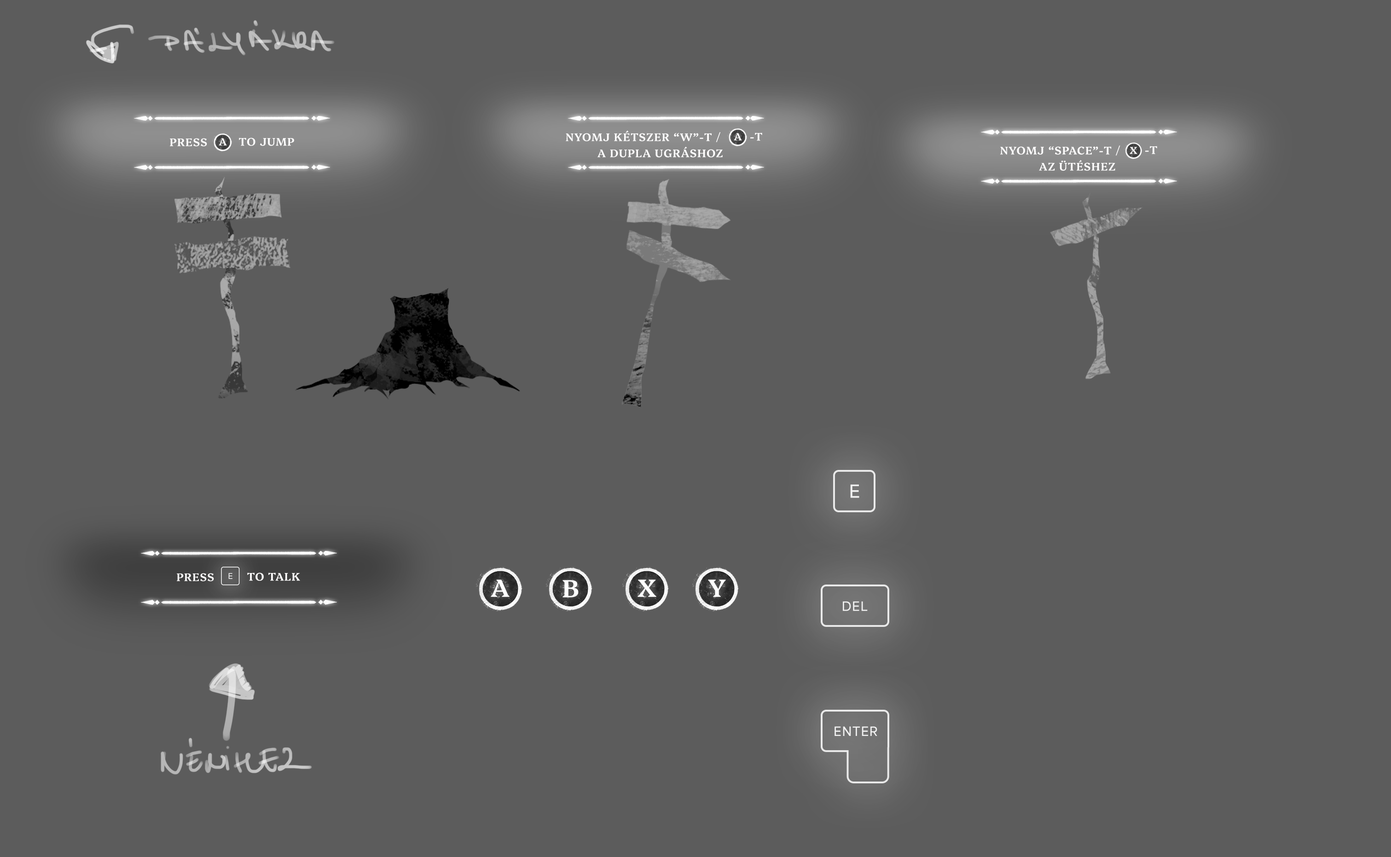
<style>
.page{position:relative;width:1391px;height:857px;background:#5c5c5c}
.page>*{position:absolute;margin:0}
.t1{font:11px "Platypi-SemiBold";letter-spacing:0.05em;color:#fffefe;text-transform:uppercase}
.t2{font:11px/16.1px "Platypi-SemiBold";letter-spacing:0.05em;color:#fffefe;text-transform:uppercase}
</style>
<div class="page">
<p class="t1" style="left:239px;top:138px;width:55px;height:8px">to jump</p>
<p class="t2" style="left:566px;top:130px;width:157px;height:27px;text-align:center">Nyomj kétszer “W”-t / <br>          a dupla UGRÁSHOZ</p>
<p class="t1" style="left:750px;top:133px;width:12px;height:8px">-t</p>
<p class="t1" style="left:170px;top:138px;width:37px;height:8px">Press</p>
<p class="t2" style="left:1000px;top:145px;width:120px;height:26px;text-align:center">Nyomj “space”-t / <br>          az ütéshez</p>
<p class="t1" style="left:1145px;top:146px;width:12px;height:8px">-t</p>
<p class="t1" style="left:177px;top:573px;width:37px;height:8px">Press</p>
<p class="t1" style="left:247px;top:573px;width:53px;height:8px">to talk</p>
</div>
